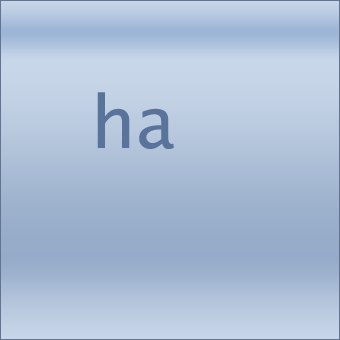
<style>
.page{position:relative;width:340px;height:340px}
.page>*{position:absolute;margin:0}
.t1{font:72px "LucidaGrande";color:#5a739b}
</style>
<div class="page">
<p class="t1" style="left:97px;top:92px;width:77px;height:57px">ha</p>
</div>
